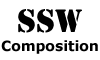
<style>
.page{position:relative;width:100px;height:60px;background:#ffffff}
.page>*{position:absolute;margin:0}
.t1{font:30px "StencilStd";color:#000000}
.t2{font:14px "MSReferenceSansSerif-Bold";color:#000000}
</style>
<div class="page">
<p class="t1" style="left:18px;top:9px;width:64px;height:24px">SSW</p>
<p class="t2" style="left:1px;top:40px;width:97px;height:14px">Composition</p>
</div>
